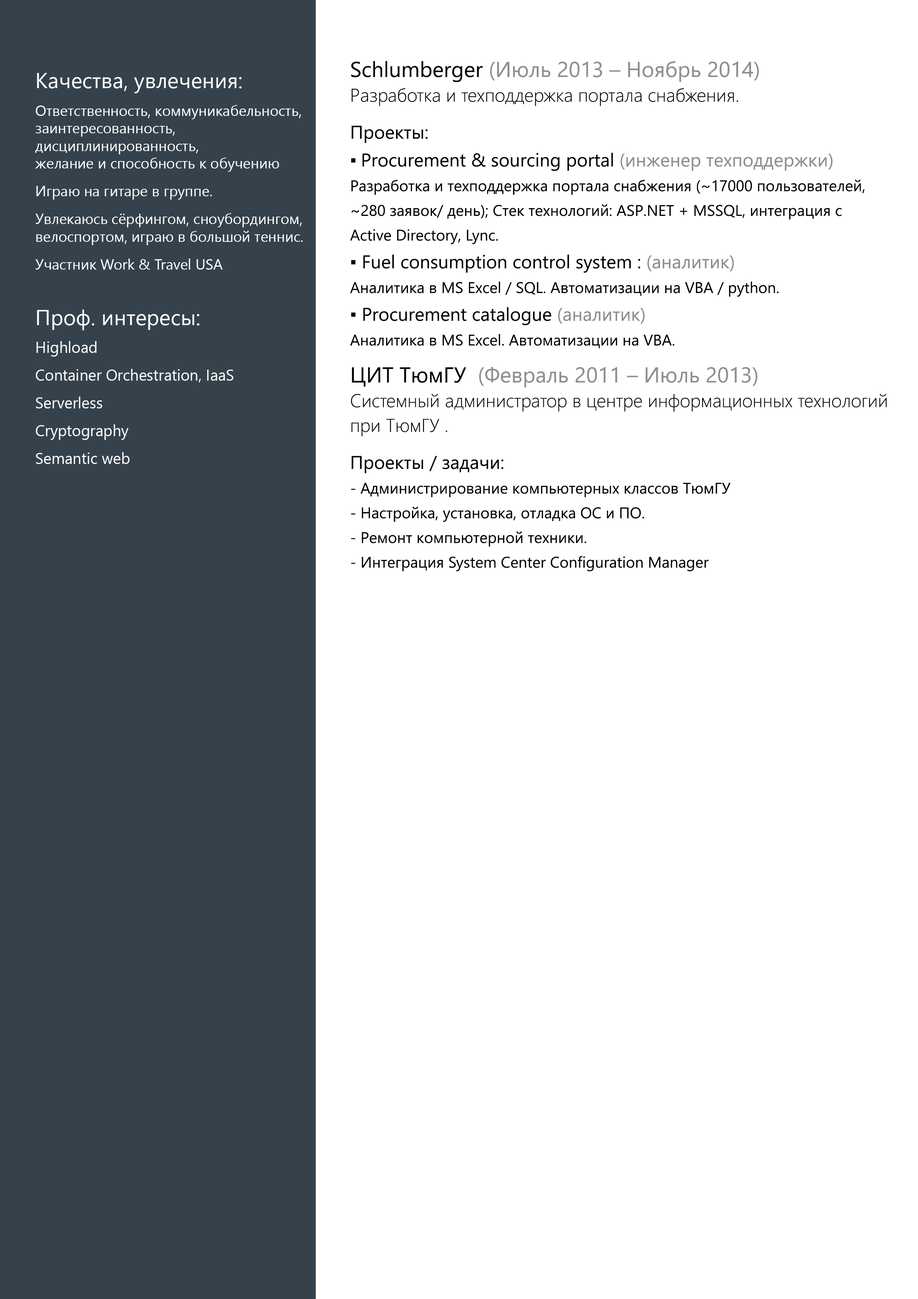
<style>
.page{position:relative;width:918px;height:1299px;background:#ffffff}
.page>*{position:absolute;margin:0}
.t1{font:15.4px/24.7px "SegoeUI";color:#000000}
.t2{font:21.6px/27.8px "SegoeUI";color:#000000}
.t3{font:21.6px/27.8px "SegoeUI";color:#8f8f8f}
.t4{font:18.5px/24.7px "SegoeUI-Light";color:#000000}
.t5{font:18.5px/37px "SegoeUI";color:#000000}
.t6{font:18.5px/27.8px "SegoeUI";color:#000000}
.t7{font:18.5px/27.8px "SegoeUI";color:#8f8f8f}
.t8{font:18.5px/24.7px "SegoeUI";color:#000000}
.t9{font:21.6px/37px "SegoeUI";color:#000000}
.t10{font:21.6px/37px "SegoeUI";color:#8f8f8f}
.t11{font:14.7px "SegoeUI";color:#ffffff}
.t12{font:15.4px/27.8px "SegoeUI";color:#ffffff}
.t13{font:21.6px/27.8px "SegoeUI";color:#ffffff}
.t14{font:14.7px/27.8px "SegoeUI";color:#ffffff}
</style>
<div class="page">
<p class="t1" style="left:350px;top:61px;width:537px;height:510px"><span class="t2">Schlumberger </span><span class="t3">(Июль 2013 – Ноябрь 2014)<br></span><span class="t4">Разработка и техподдержка портала снабжения.<br></span><span class="t5">Проекты:<br></span><span class="t6">▪ Procurement &amp; sourcing portal</span><span class="t7"> (инженер техподдержки) <br></span>Разработка и техподдержка портала снабжения (~17000 пользователей, <br>~280 заявок/ день); Стек технологий: ASP.NET + MSSQL, интеграция с <br>Active Directory, Lync.<br><span class="t6">▪ Fuel consumption control system : </span><span class="t7">(аналитик) <br></span>Аналитика в MS Excel / SQL. Автоматизации на VBA / python.<br><span class="t8">▪ </span><span class="t6">Procurement catalogue </span><span class="t7">(аналитик) <br></span>Аналитика в MS Excel. Автоматизации на VBA.<br><span class="t9">ЦИТ ТюмГУ  </span><span class="t10">(Февраль 2011 – Июль 2013)<br></span><span class="t4">Системный администратор в центре информационных технологий <br>при ТюмГУ . <br></span><span class="t5">Проекты / задачи:<br></span>- Администрирование компьютерных классов ТюмГУ<br>- Настройка, установка, отладка ОС и ПО. <br>- Ремонт компьютерной техники.<br>- Интеграция System Center Configuration Manager</p>
<p class="t11" style="left:35px;top:73px;width:268px;height:391px"><span class="t12"><br></span><span class="t13">Качества, увлечения:<br></span><span class="t14">Ответственность, коммуникабельность,<br></span>заинтересованность, <br>дисциплинированность, <br>желание и способность к обучению<br><span class="t14">Играю на гитаре в группе. <br>Увлекаюсь сёрфингом, сноубордингом, <br></span>велоспортом, играю в большой теннис. <br><span class="t14">Участник Work &amp; Travel USA<br><br></span><span class="t13">Проф. интересы:<br></span><span class="t12">Highload<br>Container Orchestration, IaaS<br>Serverless<br>Cryptography<br>Semantic web</span></p>
</div>
